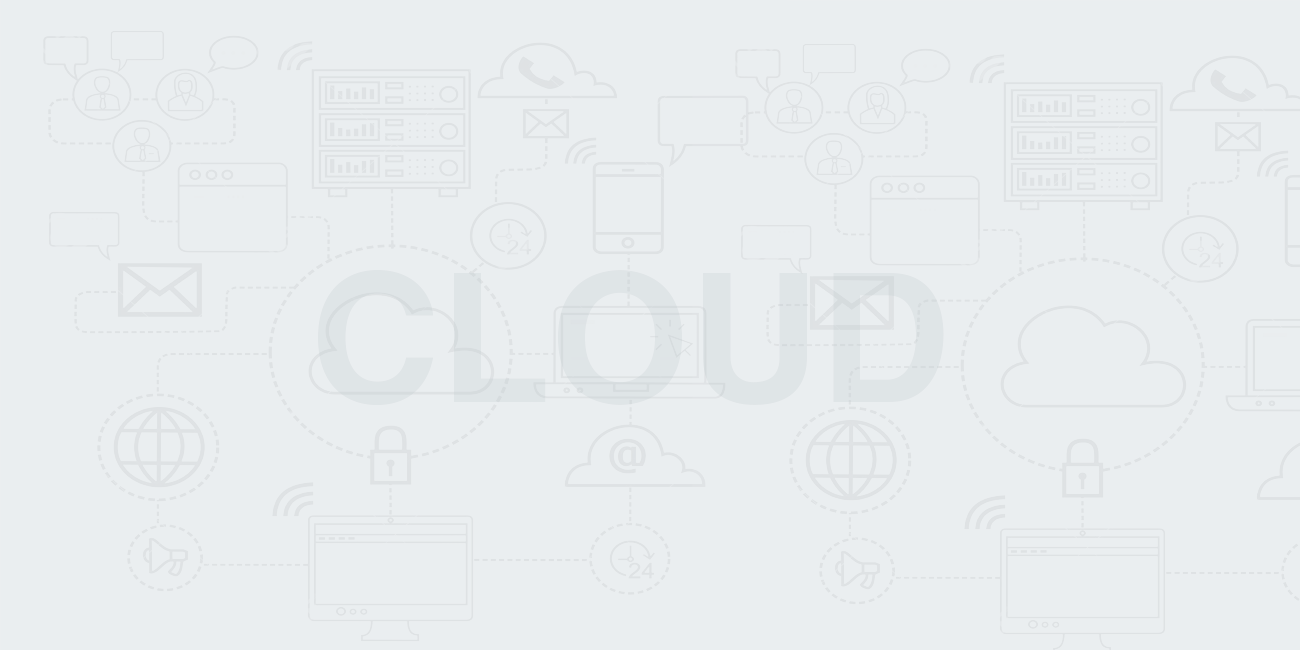
<style>
.page{position:relative;width:1300px;height:650px;background:#eaeef0}
.page>*{position:absolute;margin:0}
.t1{font:180px "HelveticaCE-Bold";color:#dfe5e7;text-transform:uppercase}
</style>
<div class="page">
<p class="t1" style="left:318px;top:269px;width:626px;height:137px">CLOUD</p>
</div>
